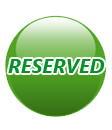
<style>
.page{position:relative;width:112px;height:130px;background:#ffffff}
.page>*{position:absolute;margin:0}
.t1{font:20px "SegoeUI-BoldItalic";color:#059229}
</style>
<div class="page">
<p class="t1" style="left:8px;top:59px;width:97px;height:14px">RESERVED</p>
</div>
